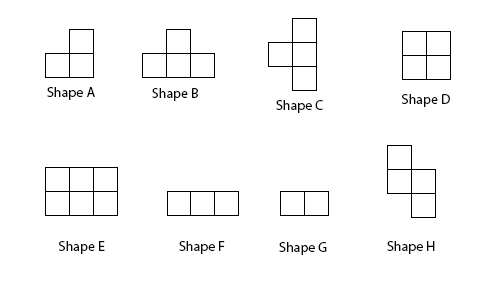
<style>
.page{position:relative;width:500px;height:300px;background:#ffffff}
.page>*{position:absolute;margin:0}
.t1{font:14px "MyriadPro-Regular";color:#000000}
.t2{font:14px "MyriadPro-Regular";color:#040404}
</style>
<div class="page">
<p class="t1" style="left:47px;top:87px;width:48px;height:13px">Shape A</p>
<p class="t1" style="left:152px;top:88px;width:46px;height:13px">Shape B</p>
<p class="t2" style="left:276px;top:100px;width:47px;height:13px">Shape C</p>
<p class="t2" style="left:401px;top:94px;width:49px;height:13px">Shape D</p>
<p class="t2" style="left:58px;top:241px;width:47px;height:13px">Shape E</p>
<p class="t2" style="left:179px;top:241px;width:46px;height:13px">Shape F</p>
<p class="t2" style="left:279px;top:242px;width:48px;height:13px">Shape G</p>
<p class="t2" style="left:387px;top:241px;width:48px;height:13px">Shape H</p>
</div>
